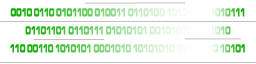
<style>
.page{position:relative;width:256px;height:64px;background:#ffffff}
.page>*{position:absolute;margin:0}
.t1{font:12px/18px "MicrogrammaD-BoldExte";font-weight:bold;scale:0.5 1}
</style>
<div class="page">
<p class="t1" style="left:10px;top:8px;width:235px;height:45px;text-align:center">0010 0110 0101100 010011 0110100 10101101 1010111 01101101 0110111 01010101 00101010 1001010 <br>110 00110 1010101 0001010 10101010 10101010 10101</p>
</div>
